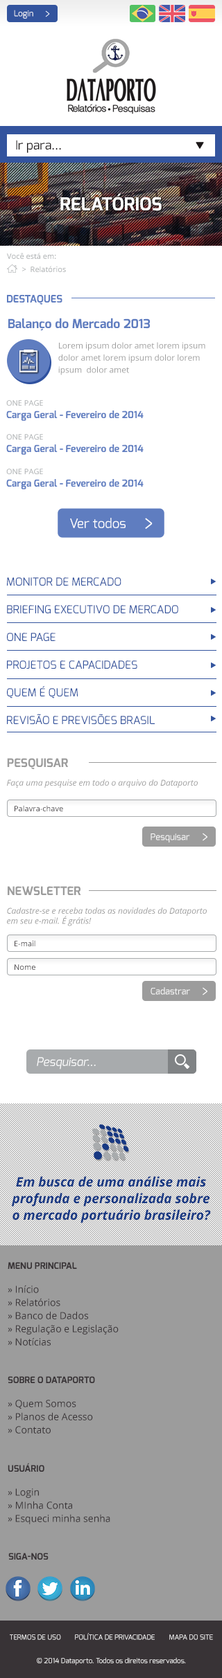
<style>
.page{position:relative;width:222px;height:1678px;background:#ffffff}
.page>*{position:absolute;margin:0}
.t1{font:8.3px "Exo-Regular";color:#ffffff}
.t2{font:12.5px "Exo-Regular";color:#1b1718}
.t3{font:18px "Exo-Bold";color:#ffffff;text-transform:uppercase}
.t4{font:7.6px "OpenSans";color:#a8abad}
.t5{font:10.4px "Exo-Bold";color:#5f7dc0}
.t6{font:12.5px "Exo-Bold";color:#5f7dc0}
.t7{font:8.3px/12px "OpenSans";color:#9c9c9c}
.t8{font:9.7px "Exo-Bold";color:#5f7dc0}
.t9{font:13px "Exo-Regular";color:#ffffff}
.t10{font:11.1px/27.7px "Exo-Regular";color:#33549e}
.t11{font:11.8px "Exo-Bold";color:#9c9c9c}
.t12{font:8.3px "OpenSans-Italic";color:#9c9c9c}
.t13{font:7.6px "OpenSans";color:#444043}
.t14{font:9px "Exo-Regular";color:#ffffff}
.t15{font:11.8px "Exo-Italic";color:#ffffff}
.t16{font:13.2px/16.6px "OpenSans-BoldItalic";color:#173883}
.t17{font:9.7px/13.2px "OpenSans";color:#383336}
.t18{font:9px "Exo-Bold";color:#383336;text-transform:uppercase}
.t19{font:6.9px "Exo-Regular";color:#ffffff;text-transform:uppercase}
.t20{font:6.9px "Exo-Regular";color:#ffffff}
</style>
<div class="page">
<p class="t1" style="left:14px;top:10px;width:19px;height:9px">Login</p>
<p class="t2" style="left:16px;top:140px;width:45px;height:13px">Ir para...</p>
<p class="t3" style="left:60px;top:193px;width:101px;height:18px">RELATÓRIOS</p>
<p class="t4" style="left:7px;top:253px;width:49px;height:6px">Você está em:</p>
<p class="t4" style="left:22px;top:266px;width:44px;height:6px">&gt;  Relatórios</p>
<p class="t5" style="left:7px;top:295px;width:55px;height:10px">DESTAQUES</p>
<p class="t6" style="left:8px;top:318px;width:142px;height:13px">Balanço do Mercado 2013</p>
<p class="t7" style="left:58px;top:342px;width:147px;height:33px">Lorem ipsum dolor amet lorem ipsum dolor amet lorem ipsum dolor lorem ipsum  dolor amet</p>
<p class="t4" style="left:6px;top:400px;width:37px;height:6px">ONE PAGE</p>
<p class="t8" style="left:6px;top:411px;width:137px;height:10px">Carga Geral - Fevereiro de 2014</p>
<p class="t4" style="left:6px;top:434px;width:37px;height:6px">ONE PAGE</p>
<p class="t8" style="left:6px;top:444px;width:137px;height:11px">Carga Geral - Fevereiro de 2014</p>
<p class="t4" style="left:6px;top:469px;width:37px;height:5px">ONE PAGE</p>
<p class="t8" style="left:6px;top:479px;width:137px;height:10px">Carga Geral - Fevereiro de 2014</p>
<p class="t9" style="left:70px;top:518px;width:55px;height:10px">Ver todos</p>
<p class="t10" style="left:7px;top:577px;width:171px;height:148px">MONITOR DE MERCADO<br>BRIEFING EXECUTIVO DE MERCADO<br>ONE PAGE<br>PROJETOS E CAPACIDADES<br>QUEM É QUEM<br>REVISÃO E PREVISÕES BRASIL</p>
<p class="t11" style="left:7px;top:758px;width:61px;height:11px">PESQUISAR</p>
<p class="t12" style="left:7px;top:780px;width:190px;height:8px">Faça uma pesquise em todo o arquivo do Dataporto</p>
<p class="t13" style="left:15px;top:805px;width:48px;height:6px">Palavra-chave</p>
<p class="t14" style="left:150px;top:834px;width:40px;height:9px">Pesquisar</p>
<p class="t11" style="left:8px;top:886px;width:73px;height:10px">NEWSLETTER</p>
<p class="t12" style="left:7px;top:908px;width:199px;height:18px">Cadastre-se e receba todas as novidades do Dataporto<br>em seu e-mail. É grátis!</p>
<p class="t13" style="left:15px;top:940px;width:20px;height:6px">E-mail</p>
<p class="t13" style="left:15px;top:964px;width:20px;height:6px">Nome</p>
<p class="t14" style="left:150px;top:987px;width:40px;height:8px">Cadastrar</p>
<p class="t15" style="left:37px;top:1057px;width:59px;height:13px">Pesquisar...</p>
<p class="t16" style="left:12px;top:1176px;width:198px;height:47px;text-align:center">Em busca de uma análise mais<br>profunda e personalizada sobre<br>o mercado portuário brasileiro?</p>
<p class="t17" style="left:8px;top:1262px;width:110px;height:84px"><span class="t18">MENU PRINCIPAL<br><br></span>» Início<br>» Relatórios<br>» Banco de Dados<br>» Regulação e Legislação<br>» Notícias</p>
<p class="t17" style="left:8px;top:1376px;width:87px;height:58px"><span class="t18">SOBRE O DATAPORTO<br><br></span>» Quem Somos<br>» Planos de Acesso<br>» Contato</p>
<p class="t17" style="left:8px;top:1463px;width:102px;height:61px"><span class="t18">usuário<br><br></span>» Login<br>» MInha Conta<br>» Esqueci minha senha</p>
<p class="t18" style="left:8px;top:1553px;width:40px;height:7px">SIGA-NOS</p>
<p class="t19" style="left:10px;top:1633px;width:203px;height:7px">Termos de Uso        Política de Privacidade        Mapa do Site</p>
<p class="t20" style="left:37px;top:1657px;width:149px;height:9px">© 2014 Dataporto. Todos os direitos reservados.</p>
</div>
